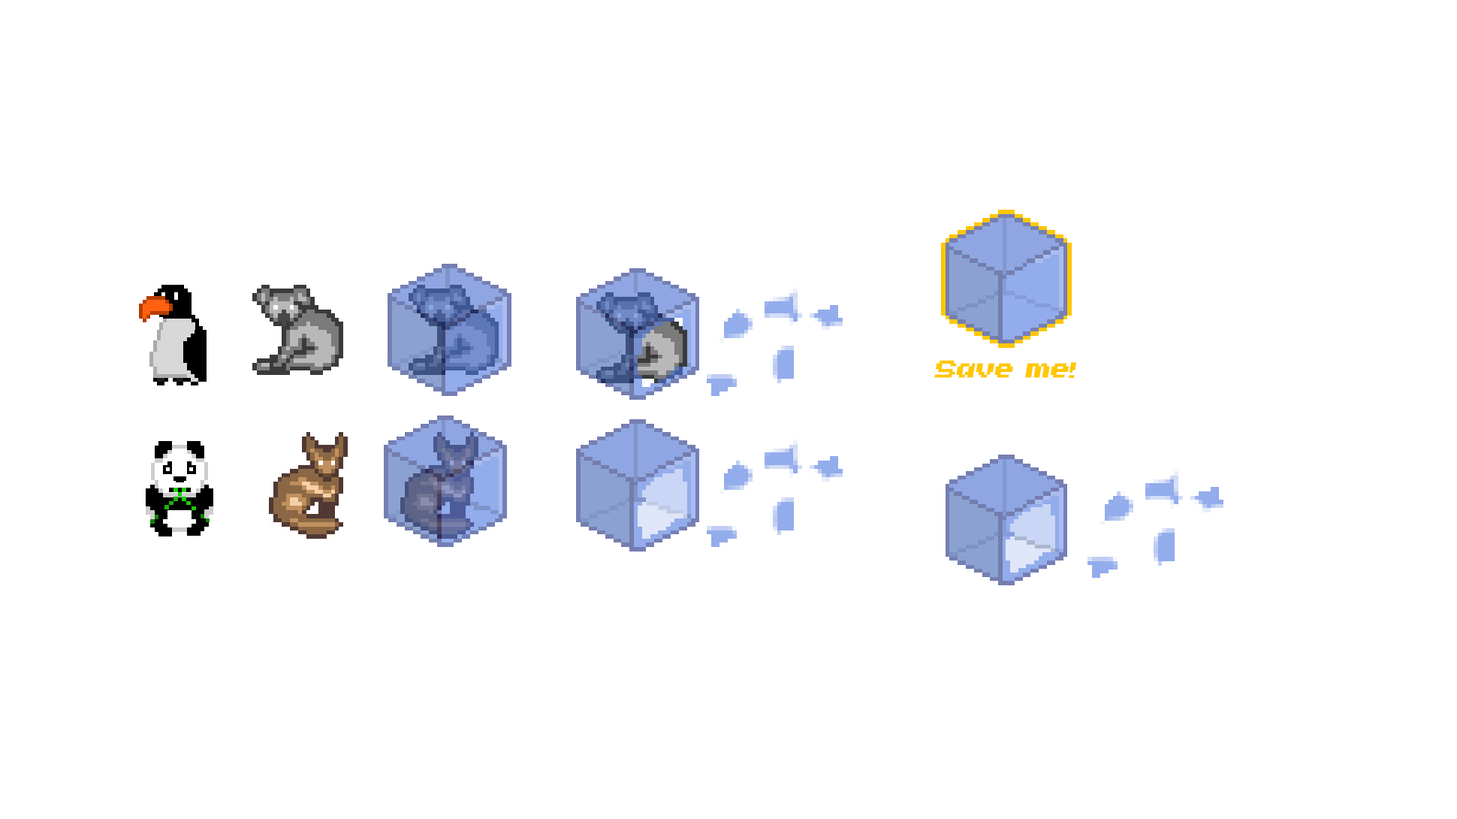
<style>
.page{position:relative;width:1457px;height:819px;background:#ffffff}
.page>*{position:absolute;margin:0}
.t1{font:28.2px "Invasion2000";color:#ffc700}
</style>
<div class="page">
<p class="t1" style="left:934px;top:360px;width:142px;height:18px">Save me!</p>
</div>
